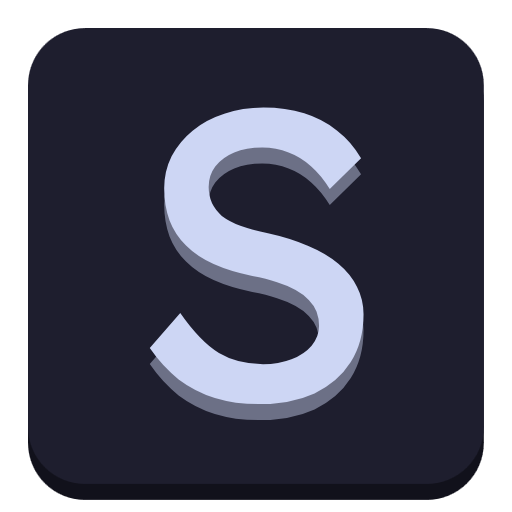
<style>
.page{position:relative;width:512px;height:512px;background:#1e1e2e}
.page>*{position:absolute;margin:0}
.t1{font:411.9px "LexendDeca-Regular";color:#cdd6f4}
</style>
<div class="page">
<p class="t1" style="left:149px;top:107px;width:215px;height:297px">S</p>
</div>
